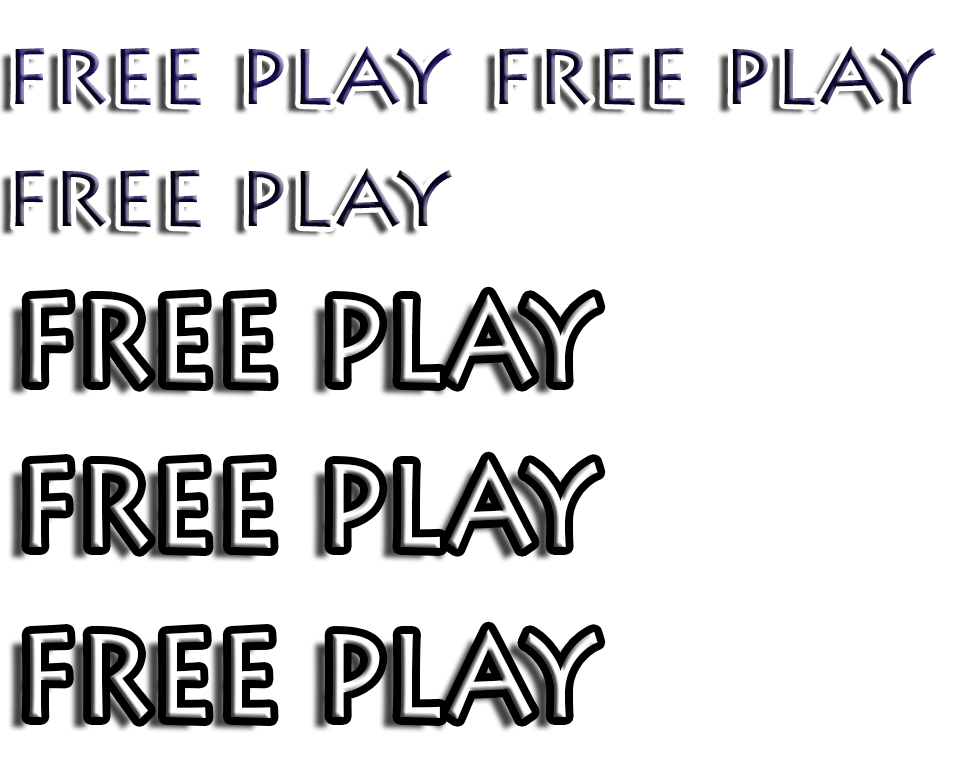
<style>
.page{position:relative;width:980px;height:780px;background:#ffffff}
.page>*{position:absolute;margin:0}
.t1{font:92.4px "LithosPro-Regular"}
.t2{font:139.5px "LithosPro-Regular";scale:0.88 1}
</style>
<div class="page">
<p class="t1" style="left:15px;top:46px;width:437px;height:59px">free play</p>
<p class="t1" style="left:499px;top:46px;width:437px;height:59px">free play</p>
<p class="t1" style="left:15px;top:168px;width:437px;height:59px">free play</p>
<p class="t2" style="left:29px;top:294px;width:569px;height:90px">free play</p>
<p class="t2" style="left:29px;top:459px;width:569px;height:90px">free play</p>
<p class="t2" style="left:29px;top:629px;width:569px;height:90px">free play</p>
</div>
